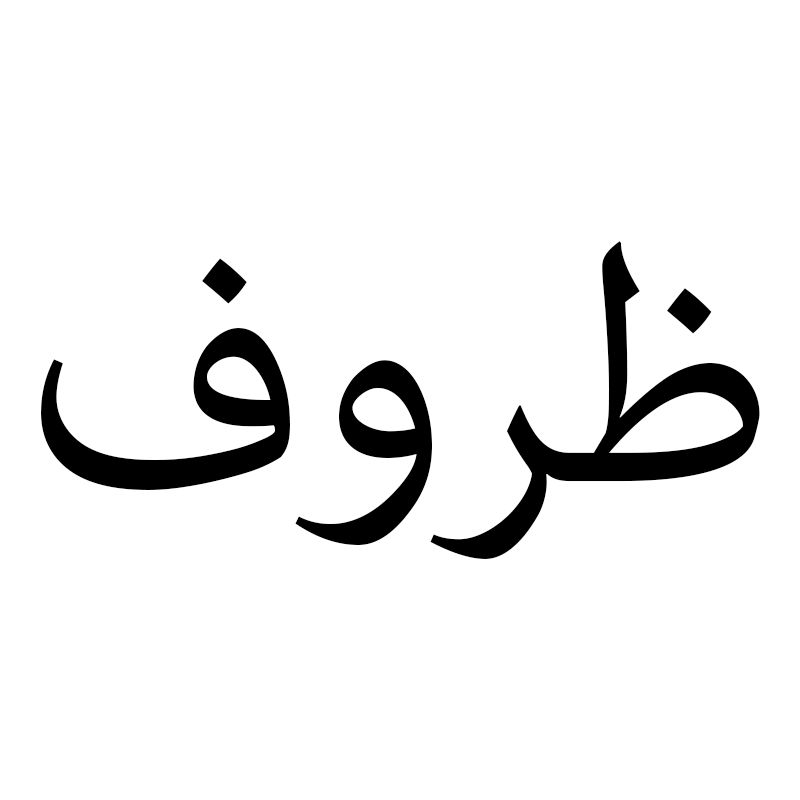
<style>
.page{position:relative;width:800px;height:800px;background:#ffffff}
.page>*{position:absolute;margin:0}
.t1{font:450px "AdobeArabic-Regular";color:#000000}
</style>
<div class="page">
<p class="t1" style="left:41px;top:241px;width:719px;height:318px">ظروف</p>
</div>
